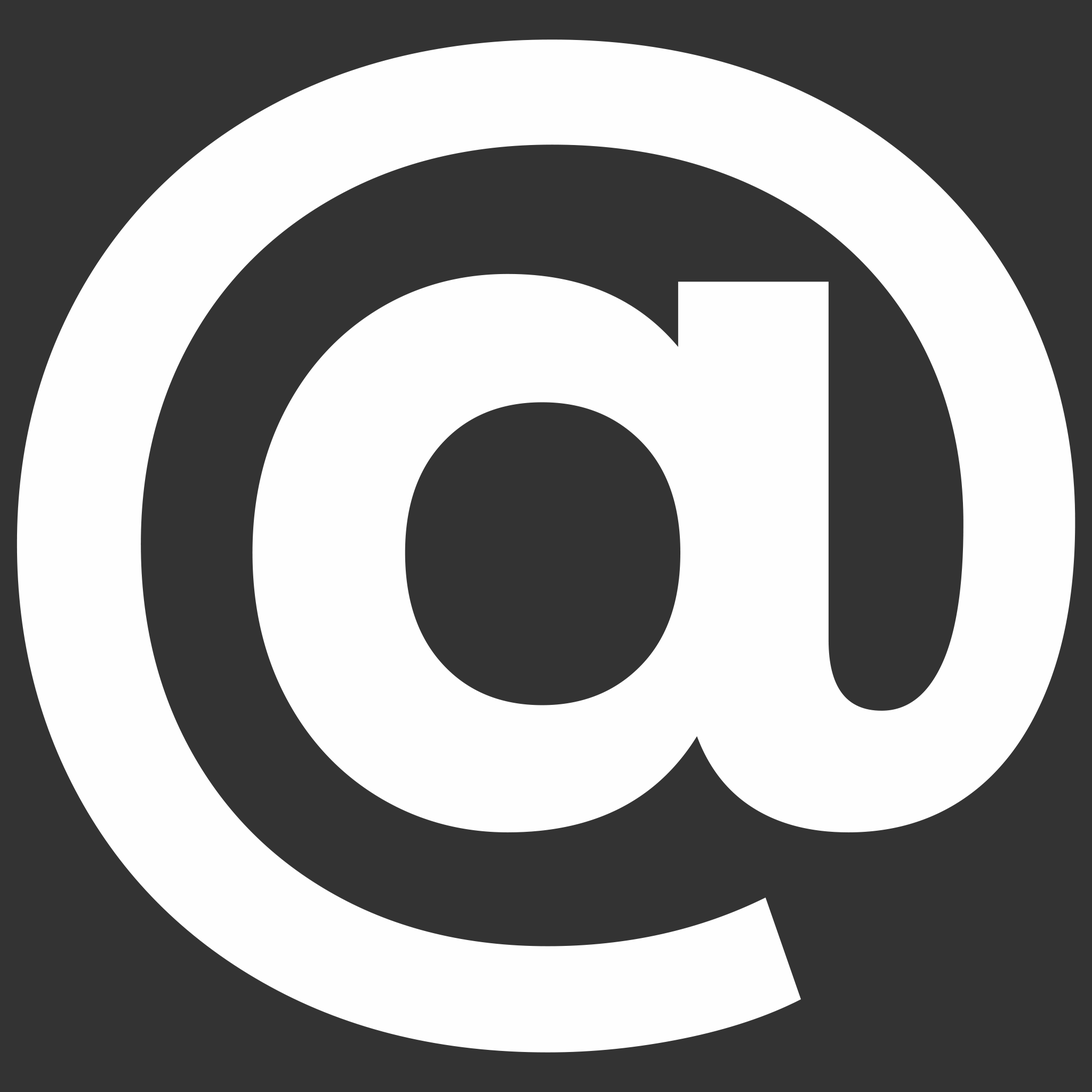
<style>
.page{position:relative;width:1092px;height:1092px;background:#333333}
.page>*{position:absolute;margin:0}
.t1{font:1105.6px "Montserrat-Bold";color:#fefefe}
</style>
<div class="page">
<p class="t1" style="left:17px;top:39px;width:1058px;height:1014px">@</p>
</div>
